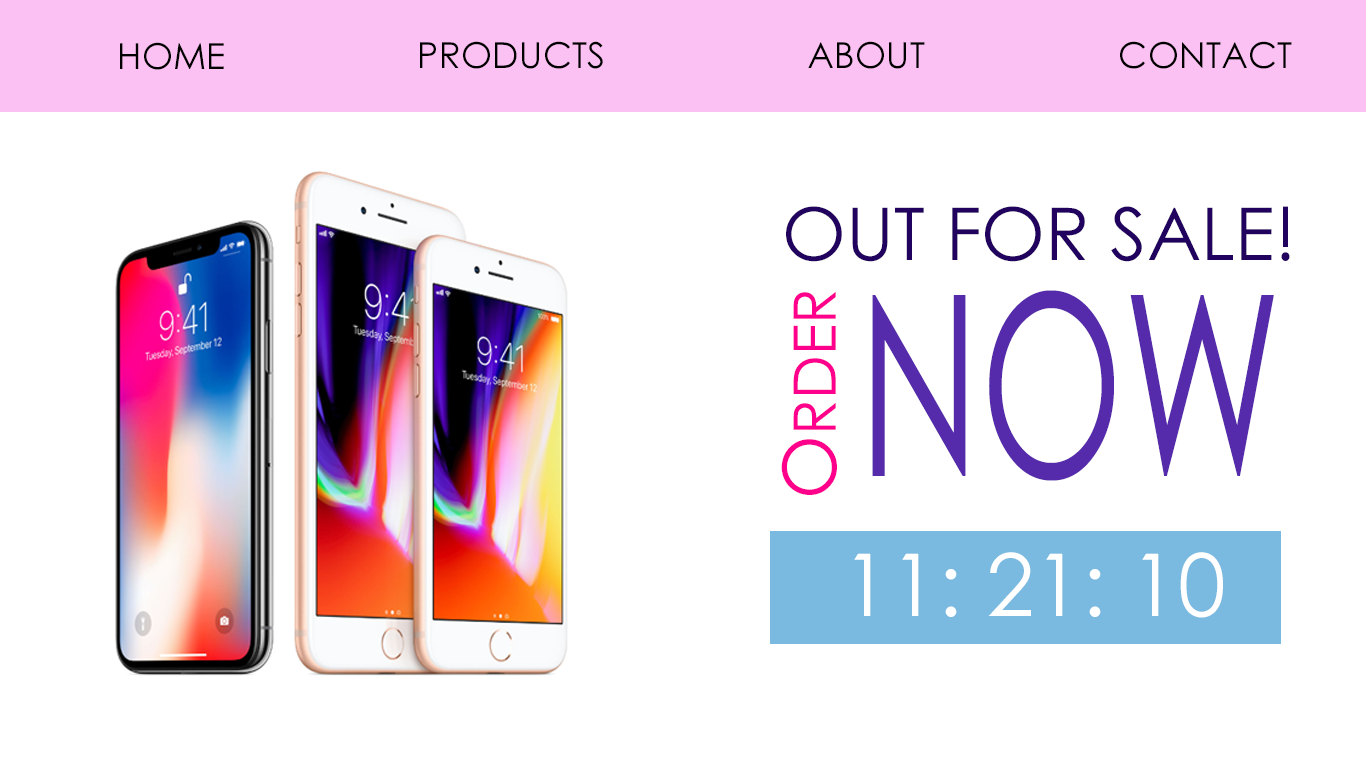
<style>
.page{position:relative;width:1366px;height:768px;background:#ffffff}
.page>*{position:absolute;margin:0}
.t1{font:36px "CenturyGothic";color:#000000;text-transform:uppercase}
.t2{font:72.8px "CenturyGothic";color:#22025f;text-transform:uppercase}
.t3{font:58.7px "CenturyGothic";color:#ff008d;text-transform:uppercase}
.t4{font:73.4px "CenturyGothic";color:#ff008d;text-transform:uppercase}
.t5{font:251.9px "CenturyGothic";color:#562bab;text-transform:uppercase;scale:0.65 1}
.t6{font:86.6px "CenturyGothic";color:#ffffff;text-transform:uppercase}
</style>
<div class="page">
<p class="t1" style="left:420px;top:41px;width:183px;height:28px">Products</p>
<p class="t1" style="left:808px;top:41px;width:117px;height:28px">About</p>
<p class="t1" style="left:1120px;top:41px;width:172px;height:28px">Contact</p>
<p class="t1" style="left:120px;top:42px;width:104px;height:28px">HOME</p>
<p class="t2" style="left:786px;top:206px;width:504px;height:56px">Out For Sale!</p>
<p class="t3" style="left:781px;top:291px;width:56px;height:204px;rotate:-90deg"><span class="t4">o</span>rder</p>
<p class="t5" style="left:872px;top:290px;width:402px;height:191px">Now</p>
<p class="t6" style="left:854px;top:552px;width:369px;height:66px">11: 21: 10</p>
</div>
